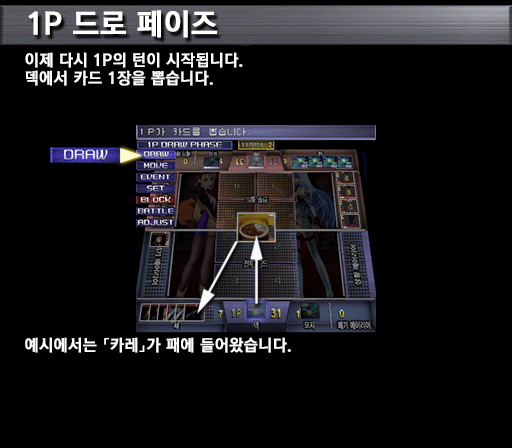
<style>
.page{position:relative;width:512px;height:448px;background:#000000}
.page>*{position:absolute;margin:0}
.t1{font:30px "KoreanGD15-R";color:#ffffff;font-weight:bold}
.t2{font:16px/18px "KoreanGD15-R";color:#ffffff;font-weight:bold}
.t3{font:16px "KoreanGD15-R";color:#ffffff;font-weight:bold}
</style>
<div class="page">
<p class="t1" style="left:28px;top:10px;width:189px;height:28px">1P 드로 페이즈</p>
<p class="t2" style="left:25px;top:52px;width:218px;height:34px">이제 다시 1P의 턴이 시작됩니다.<br>덱에서 카드 1장을 뽑습니다.</p>
<p class="t3" style="left:25px;top:337px;width:266px;height:16px">예시에서는 「카레」가 패에 들어왔습니다.</p>
</div>
